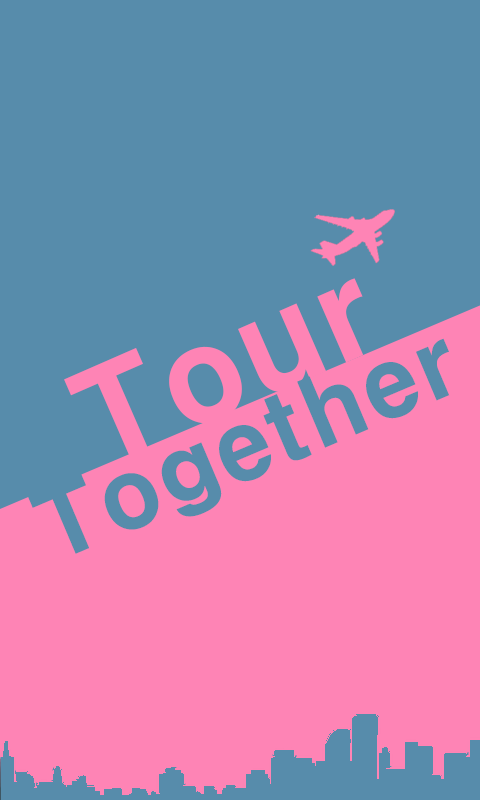
<style>
.page{position:relative;width:480px;height:800px;background:#578cab}
.page>*{position:absolute;margin:0}
.t1{font:127.1px "HYgtrE";color:#fe84b5}
.t2{font:93.7px "HYgtrE";color:#578cab}
</style>
<div class="page">
<p class="t1" style="left:64px;top:278px;width:300px;height:179px;rotate:-24deg">Tour</p>
<p class="t2" style="left:27px;top:338px;width:423px;height:216px;rotate:-23deg">Together</p>
</div>
